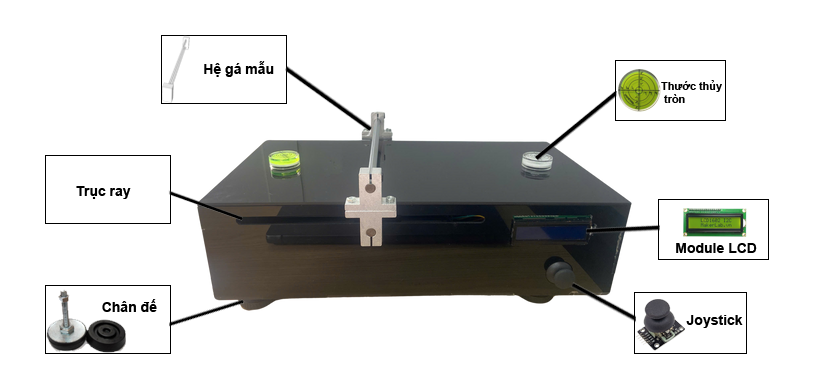
<style>
.page{position:relative;width:829px;height:386px;background:#ffffff}
.page>*{position:absolute;margin:0}
.t1{font:14px "Arial-BoldMT";color:#000000}
.t2{font:10.9px "Arial-BoldMT";color:#000000}
</style>
<div class="page">
<p class="t1" style="left:204px;top:61px;width:70px;height:16px">Hệ gá mẫu</p>
<p class="t2" style="left:661px;top:80px;width:61px;height:23px">Thước thủy<br> tròn</p>
<p class="t1" style="left:76px;top:186px;width:55px;height:13px">Trục ray</p>
<p class="t1" style="left:676px;top:243px;width:81px;height:10px">Module LCD</p>
<p class="t1" style="left:102px;top:299px;width:55px;height:13px">Chân đế</p>
<p class="t1" style="left:686px;top:315px;width:57px;height:13px">Joystick</p>
</div>
